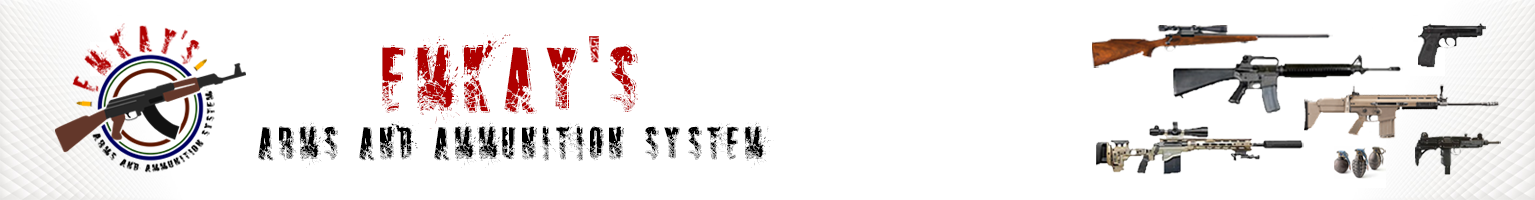
<style>
.page{position:relative;width:1535px;height:200px;background:#ffffff}
.page>*{position:absolute;margin:0}
.t1{font:96.5px "SNIPER";letter-spacing:0.1em;color:#af0000}
.t2{font:96.5px "SNIPER";letter-spacing:0.2em;color:#af0000}
.t3{font:48.2px "SNIPER";letter-spacing:0.1em;color:#000000}
</style>
<div class="page">
<p class="t1" style="left:382px;top:33px;width:256px;height:96px">EMKA<span class="t2">Y </span>S</p>
<p class="t3" style="left:258px;top:121px;width:516px;height:47px">ARMS AND AMMUNITION SYSTEM</p>
</div>
